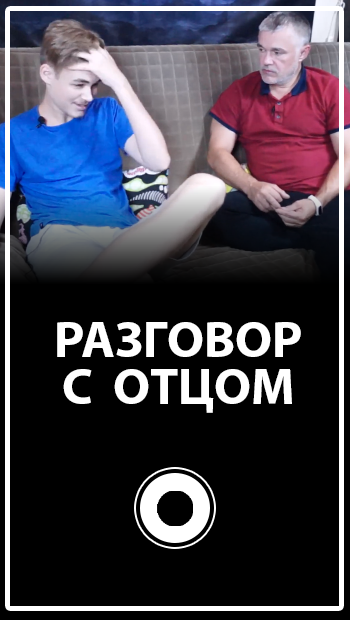
<style>
.page{position:relative;width:350px;height:620px;background:#000000}
.page>*{position:absolute;margin:0}
.t1{font:51.7px/46.8px "MyriadPro-Bold";color:#ffffff}
</style>
<div class="page">
<p class="t1" style="left:57px;top:322px;width:244px;height:91px;text-align:center">РАЗГОВОР<br>С  ОТЦОМ</p>
</div>
